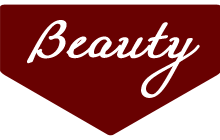
<style>
.page{position:relative;width:220px;height:140px;background:#690101}
.page>*{position:absolute;margin:0}
.t1{font:80px "Miama";color:#ffffff;font-weight:bold;scale:1.05 1}
</style>
<div class="page">
<p class="t1" style="left:27px;top:20px;width:173px;height:78px">Beauty</p>
</div>
